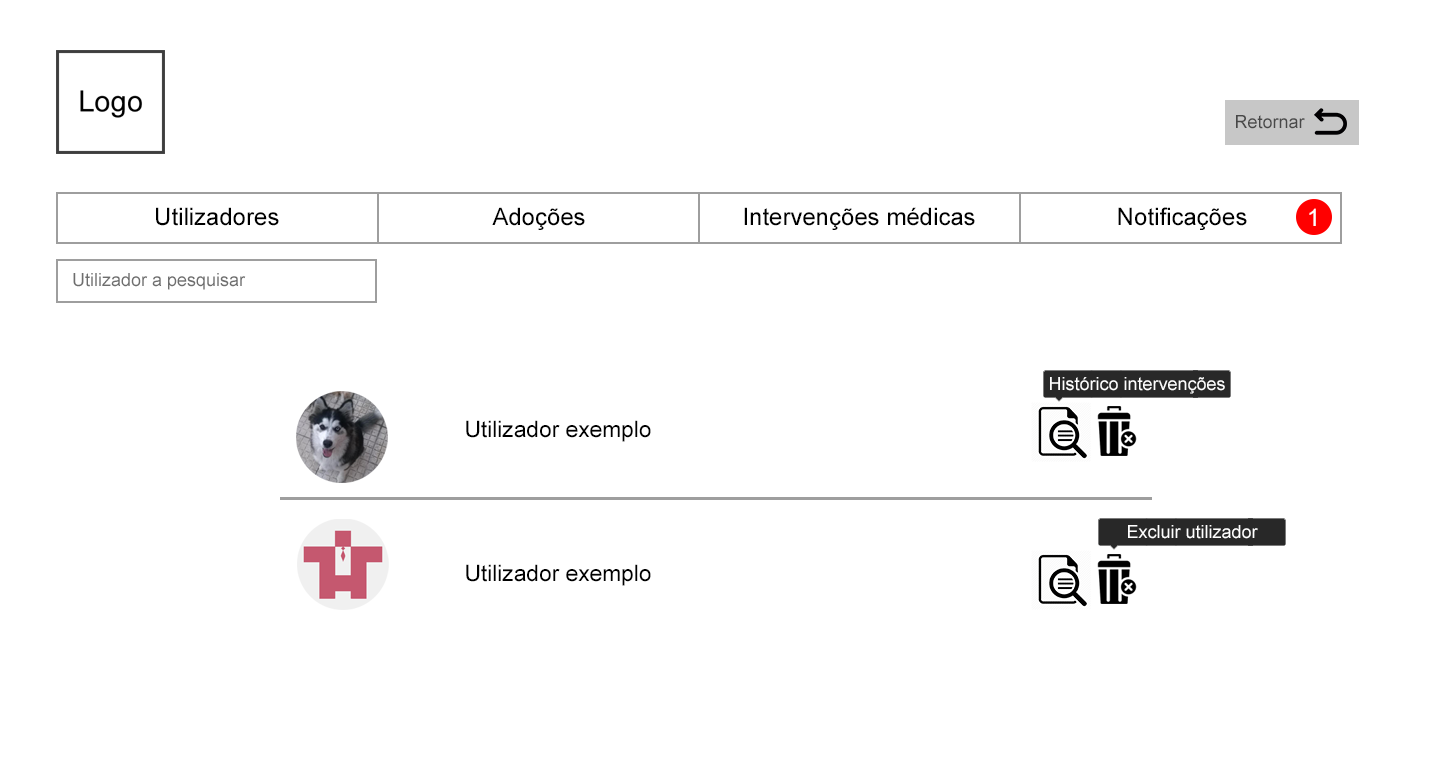
<style>
.page{position:relative;width:1431px;height:780px;background:#ffffff}
.page>*{position:absolute;margin:0}
.t1{font:18px "ArialMT";color:#484848}
.t2{font:24px "ArialMT";color:#000000}
.t3{font:24px "ArialMT";color:#ffffff}
.t4{font:18px "ArialMT";color:#6e6e6e}
.t5{font:18px "ArialMT";color:#ffffff}
.t6{font:22.7px "ArialMT";color:#000000}
</style>
<div class="page">
<p class="t1" style="left:1236px;top:115px;width:69px;height:14px">Retornar</p>
<p class="t2" style="left:156px;top:207px;width:123px;height:19px">Utilizadores</p>
<p class="t2" style="left:492px;top:207px;width:93px;height:23px">Adoções</p>
<p class="t2" style="left:744px;top:207px;width:231px;height:23px">Intervenções médicas</p>
<p class="t2" style="left:1118px;top:207px;width:129px;height:23px">Notificações</p>
<p class="t3" style="left:1309px;top:208px;width:7px;height:18px">1</p>
<p class="t4" style="left:73px;top:273px;width:173px;height:17px">Utilizador a pesquisar</p>
<p class="t5" style="left:1050px;top:377px;width:175px;height:17px">Histórico intervenções</p>
<p class="t6" style="left:466px;top:420px;width:185px;height:22px">Utilizador exemplo</p>
<p class="t5" style="left:1128px;top:525px;width:130px;height:14px">Excluir utilizador</p>
<p class="t6" style="left:466px;top:564px;width:185px;height:22px">Utilizador exemplo</p>
</div>
